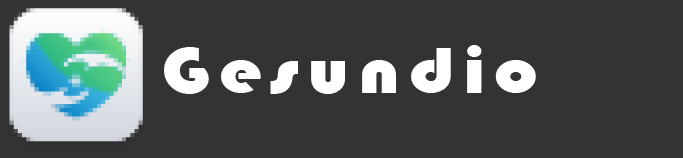
<style>
.page{position:relative;width:683px;height:158px;background:#333333}
.page>*{position:absolute;margin:0}
.t1{font:66.7px "Bauhaus93";letter-spacing:-0.07em;color:#ffffff;scale:1.17 1}
</style>
<div class="page">
<p class="t1" style="left:164px;top:45px;width:372px;height:49px">G e s u n d i o</p>
</div>
